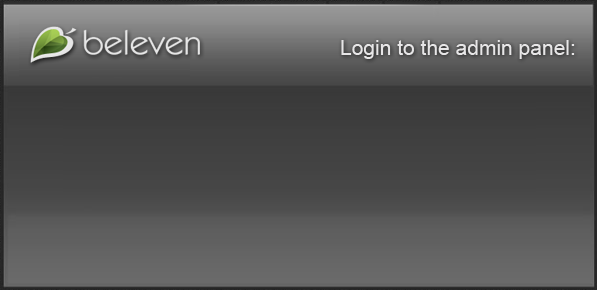
<style>
.page{position:relative;width:597px;height:290px}
.page>*{position:absolute;margin:0}
.t1{font:21px "ArialMT";color:#e7e6e7}
</style>
<div class="page">
<p class="t1" style="left:341px;top:40px;width:234px;height:19px">Login to the admin panel:</p>
</div>
